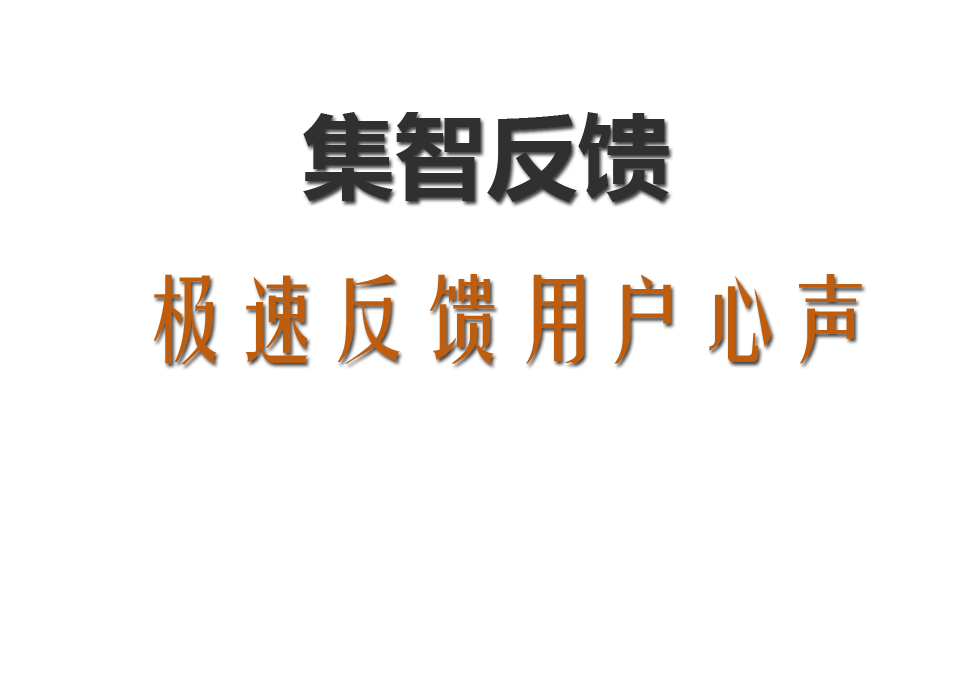
<style>
.page{position:relative;width:966px;height:673px;background:#ffffff}
.page>*{position:absolute;margin:0}
.t1{font:92px "MicrosoftYaHei-Bold";color:#303031}
.t2{font:92px "FZYTK--GBK1-0";color:#be5d0e}
</style>
<div class="page">
<p class="t1" style="left:303px;top:112px;width:366px;height:90px">集智反馈</p>
<p class="t2" style="left:153px;top:274px;width:709px;height:91px">极速反馈用户心声</p>
</div>
